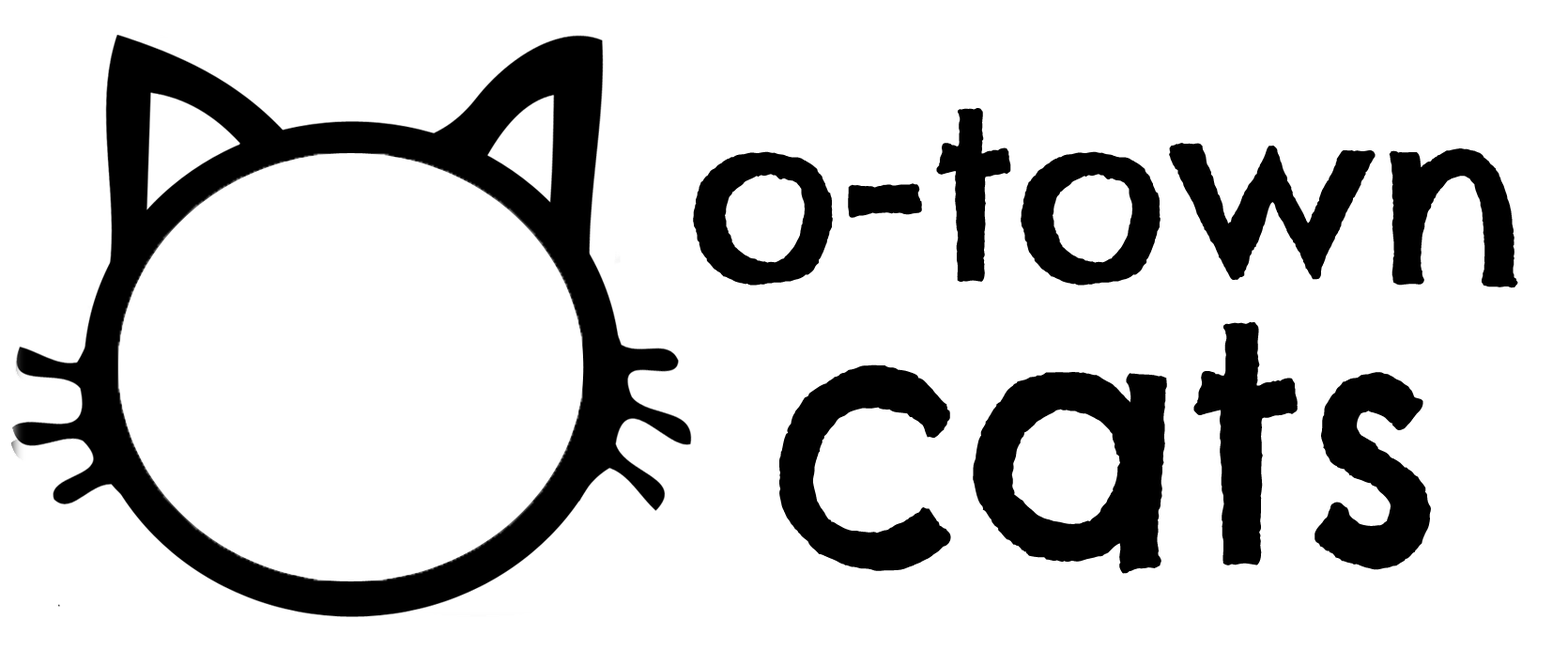
<style>
.page{position:relative;width:1568px;height:650px;background:#ffffff}
.page>*{position:absolute;margin:0}
.t1{font:234.7px "ChelseaMarket-Regular";color:#000000}
.t2{font:328.6px "ChelseaMarket-Regular";color:#000000}
</style>
<div class="page">
<p class="t1" style="left:693px;top:108px;width:825px;height:180px">o-town</p>
<p class="t2" style="left:779px;top:321px;width:652px;height:253px">cats</p>
</div>
